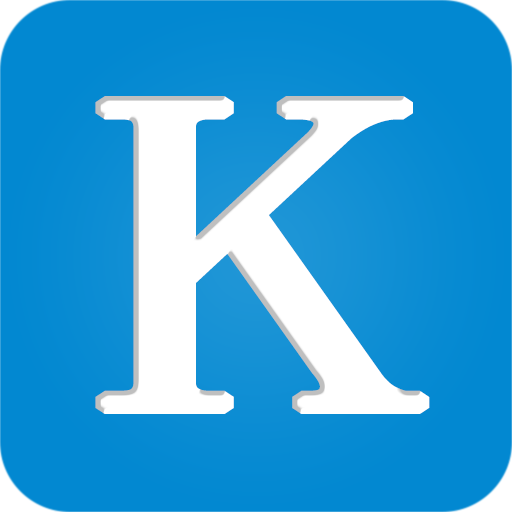
<style>
.page{position:relative;width:512px;height:512px;background:#0288d1}
.page>*{position:absolute;margin:0}
.t1{font:457.2px "NSimSun";color:#ffffff;font-weight:bold;scale:1.52 1}
</style>
<div class="page">
<p class="t1" style="left:95px;top:96px;width:335px;height:318px">K</p>
</div>
